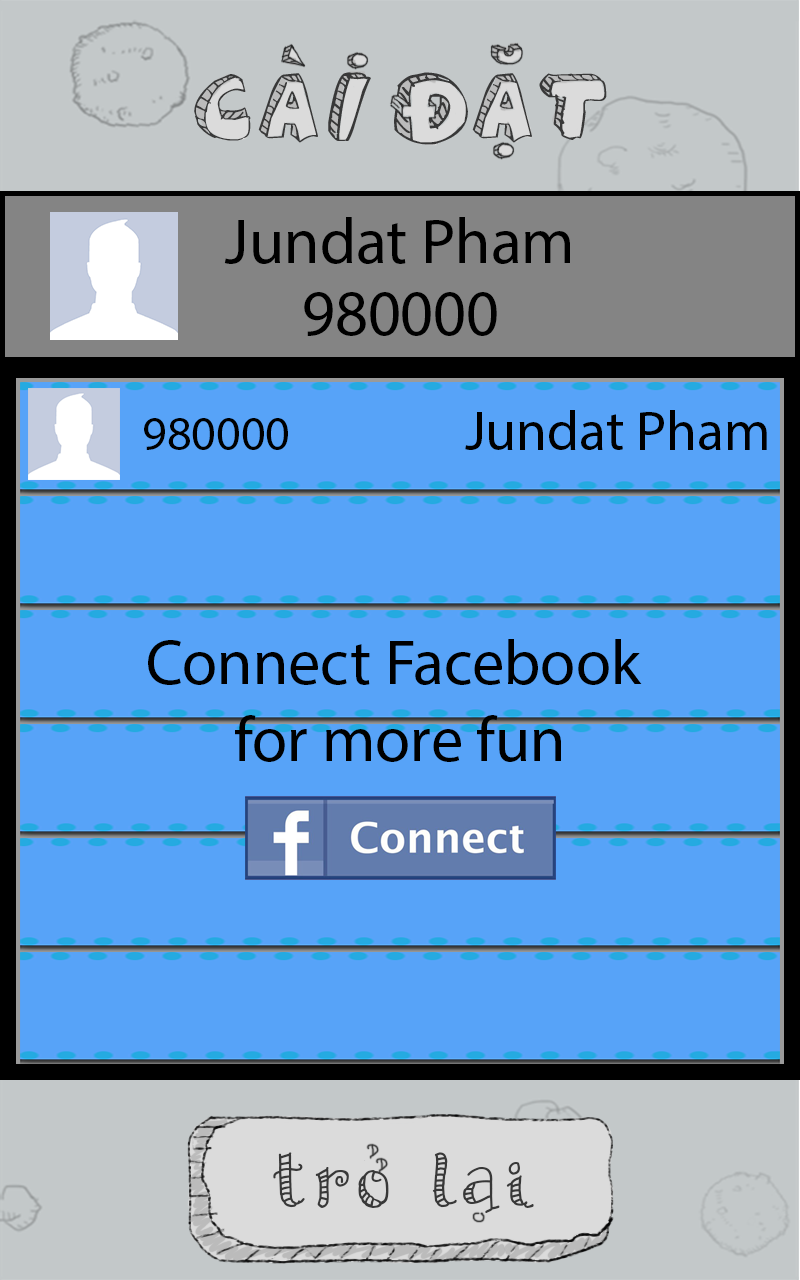
<style>
.page{position:relative;width:800px;height:1280px;background:#57a3f8}
.page>*{position:absolute;margin:0}
.t1{font:64.2px "MyriadPro-Regular";color:#000000}
.t2{font:56px "MyriadPro-Regular";color:#000000}
.t3{font:48px "MyriadPro-Regular";color:#000000}
.t4{font:64px "MyriadPro-Regular";color:#000000}
</style>
<div class="page">
<p class="t1" style="left:224px;top:217px;width:346px;height:47px">Jundat Pham</p>
<p class="t1" style="left:304px;top:292px;width:193px;height:44px">980000</p>
<p class="t2" style="left:465px;top:410px;width:302px;height:40px">Jundat Pham</p>
<p class="t3" style="left:144px;top:418px;width:144px;height:32px">980000</p>
<p class="t4" style="left:148px;top:639px;width:494px;height:123px;text-align:center">Connect Facebook <br>for more fun</p>
</div>
